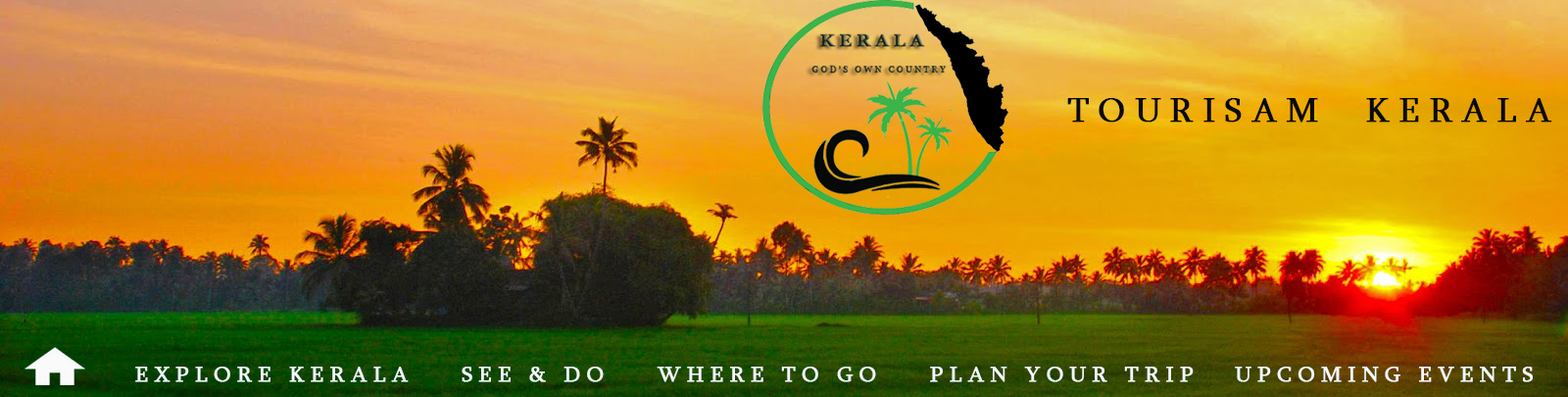
<style>
.page{position:relative;width:1568px;height:397px}
.page>*{position:absolute;margin:0}
.t1{font:35.3px "Sylfaen";letter-spacing:0.25em;color:#070907;text-transform:uppercase;font-weight:bold}
.t2{font:22.5px "Sylfaen";letter-spacing:0.25em;color:#f2fafa;text-transform:uppercase;font-weight:bold}
</style>
<div class="page">
<p class="t1" style="left:1067px;top:98px;width:485px;height:24px">TOURISAM  KERALA</p>
<p class="t2" style="left:135px;top:367px;width:1398px;height:15px">EXPLORE KERALA    SEE &amp; DO    WHERE TO GO    PLAN YOUR TRIP   UPCOMING EVENTS</p>
</div>
